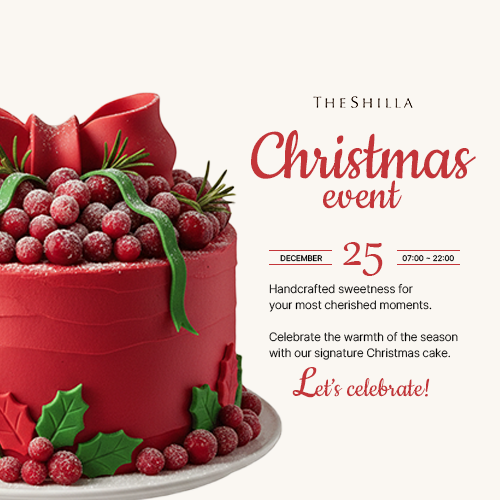
<style>
.page{position:relative;width:500px;height:500px;background:#faf7f2}
.page>*{position:absolute;margin:0}
.t1{font:80px/30px "Cookie-Regular";color:#c33539}
.t2{font:50px/30px "Cookie-Regular";color:#c33539}
.t3{font:62px "Gabriola";color:#c33539}
.t4{font:8px "Pretendard-Medium";color:#000000}
.t5{font:8px "Pretendard-Medium"}
.t6{font:12px/16px "Pretendard-Light";color:#000000}
.t7{font:30px "Cookie-Regular";color:#c33539}
.t8{font:50px "Cookie-Regular";color:#c33539}
</style>
<div class="page">
<p class="t1" style="left:251px;top:130px;width:225px;height:79px;text-align:center">Christmas<br><span class="t2">event</span></p>
<p class="t3" style="left:343px;top:242px;width:40px;height:34px">25</p>
<p class="t4" style="left:280px;top:255px;width:42px;height:7px">DECEMBER</p>
<p class="t5" style="left:402px;top:255px;width:52px;height:7px">07:00 ~ 22:00</p>
<p class="t6" style="left:269px;top:283px;width:189px;height:77px">Handcrafted sweetness for <br>your most cherished moments. <br><br>Celebrate the warmth of the season <br>with our signature Christmas cake.</p>
<p class="t7" style="left:292px;top:367px;width:138px;height:31px"><span class="t8">L</span>et’s celebrate!</p>
</div>
